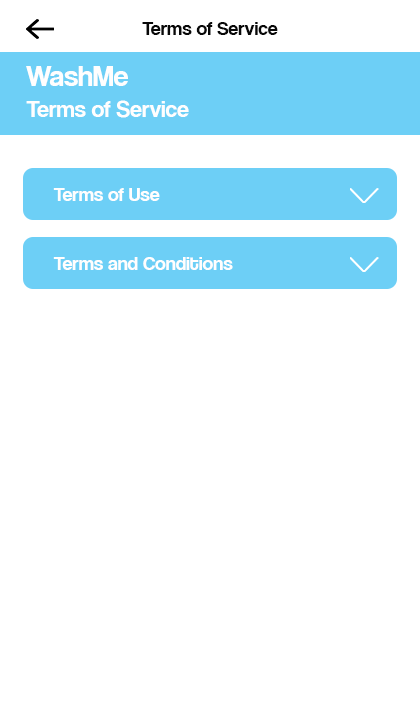
<style>
.page{position:relative;width:420px;height:720px;background:#ffffff}
.page>*{position:absolute;margin:0}
.t1{font:20px "CoolveticaRg-Regular";color:#080808}
.t2{font:30px "CoolveticaRg-Regular";color:#fffefe}
.t3{font:24px "CoolveticaRg-Regular";color:#fffefe}
.t4{font:20px "CoolveticaRg-Regular";color:#fffefe}
</style>
<div class="page">
<p class="t1" style="left:142px;top:22px;width:136px;height:13px">Terms of Service</p>
<p class="t2" style="left:26px;top:66px;width:102px;height:20px">WashMe</p>
<p class="t3" style="left:26px;top:100px;width:163px;height:18px">Terms of Service</p>
<p class="t4" style="left:53px;top:188px;width:107px;height:13px">Terms of Use</p>
<p class="t4" style="left:53px;top:257px;width:180px;height:13px">Terms and Conditions</p>
</div>
